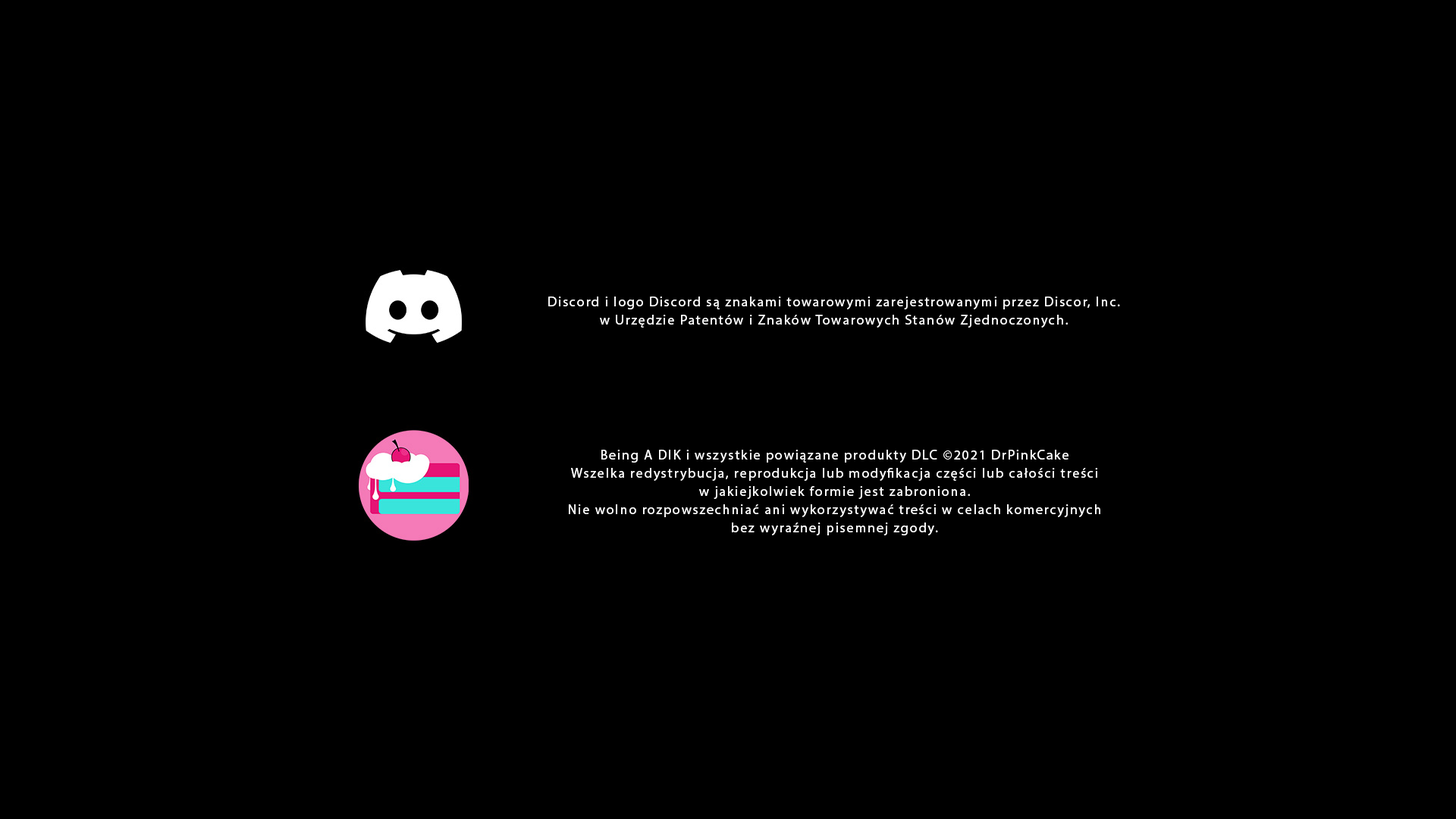
<style>
.page{position:relative;width:1456px;height:819px;background:#000000}
.page>*{position:absolute;margin:0}
.t1{font:13.6px/18.2px "MyriadPro-Regular";letter-spacing:0.1em;color:#ffffff}
</style>
<div class="page">
<p class="t1" style="left:548px;top:297px;width:572px;height:31px;text-align:center">Discord i logo Discord są znakami towarowymi zarejestrowanymi przez Discor, Inc.<br>w Urzędzie Patentów i Znaków Towarowych Stanów Zjednoczonych.</p>
<p class="t1" style="left:569px;top:450px;width:531px;height:85px;text-align:center">Being A DIK i wszystkie powiązane produkty DLC ©2021 DrPinkCake<br>Wszelka redystrybucja, reprodukcja lub modyfikacja części lub całości treści<br>w jakiejkolwiek formie jest zabroniona.<br>Nie wolno rozpowszechniać ani wykorzystywać treści w celach komercyjnych<br>bez wyraźnej pisemnej zgody.</p>
</div>
